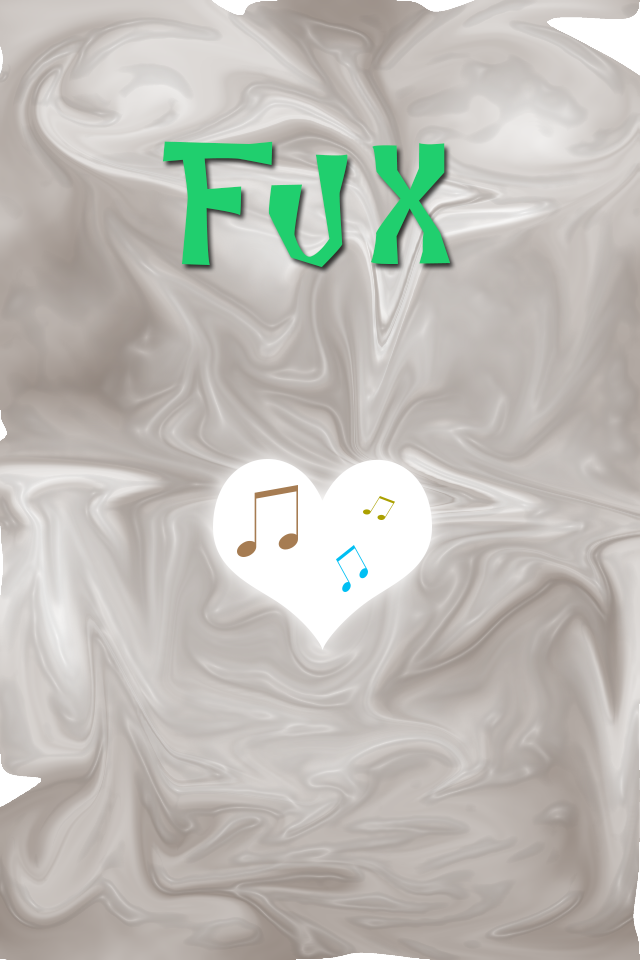
<style>
.page{position:relative;width:640px;height:960px}
.page>*{position:absolute;margin:0}
.t1{font:164.6px "Swinger";letter-spacing:0.1em;color:#20cf6e;scale:1.08 1}
</style>
<div class="page">
<p class="t1" style="left:162px;top:141px;width:289px;height:126px">Fux</p>
</div>
